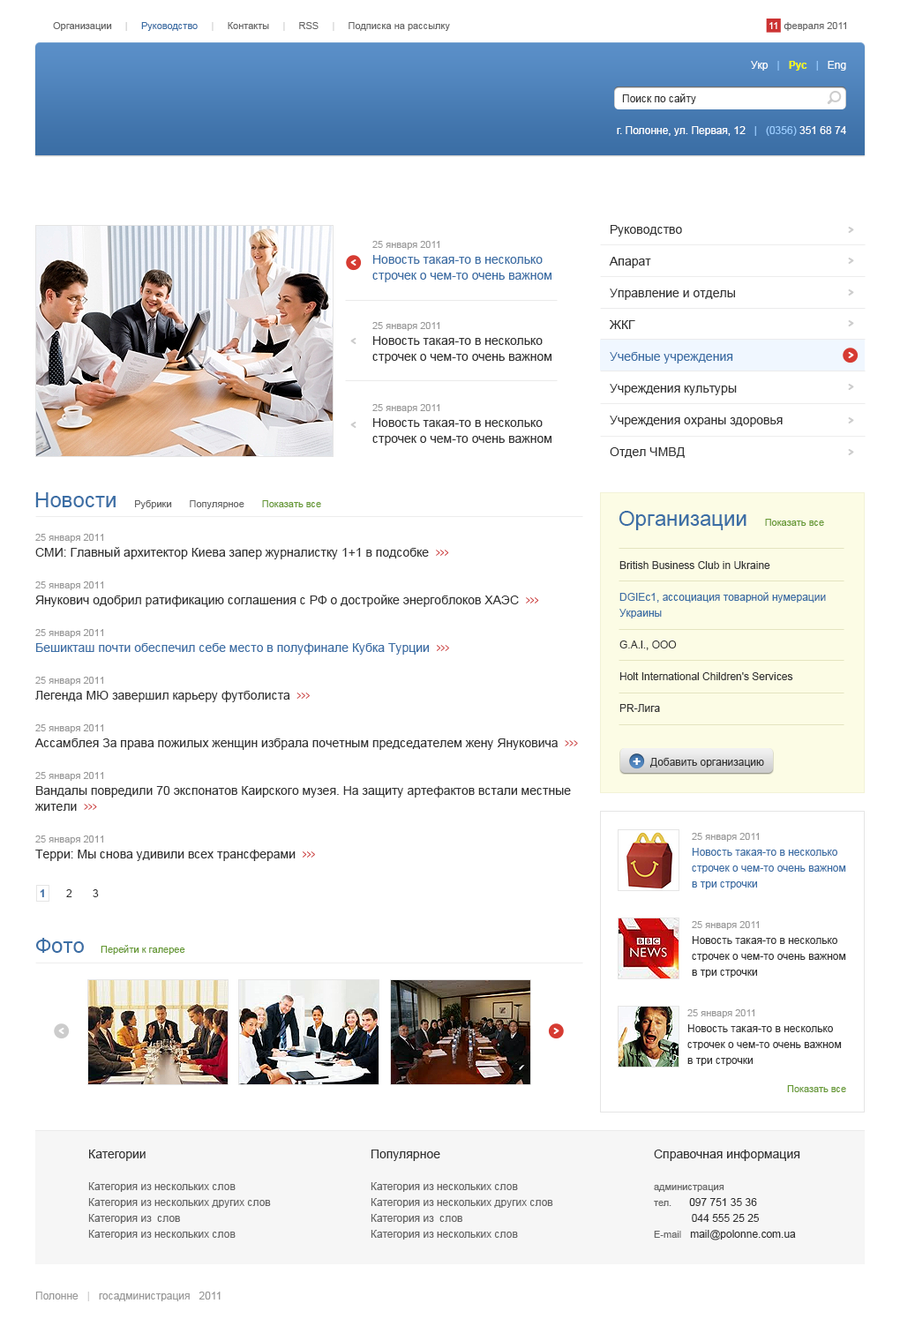
<style>
.page{position:relative;width:900px;height:1326px;background:#ffffff}
.page>*{position:absolute;margin:0}
.t1{font:9.7px "ArialMT";color:#666666}
.t2{font:9.7px "ArialMT";color:#cccccc}
.t3{font:9.7px "ArialMT";color:#3b6ea5}
.t4{font:9.7px "ArialMT";color:#ffffff}
.t5{font:10.6px "ArialMT";color:#fefefe}
.t6{font:10.6px "ArialMT";color:#99ccff}
.t7{font:10.6px "Arial-BoldMT";color:#ffff00}
.t8{font:10.6px "ArialMT";color:#333333}
.t9{font:10.6px "ArialMT";color:#ffffff}
.t10{font:12.3px/31.7px "ArialMT";color:#333333}
.t11{font:12.3px/31.7px "ArialMT";color:#3b6ea5}
.t12{font:12.3px "ArialMT";color:#333333}
.t13{font:12.3px/15.9px "ArialMT";color:#3b6ea5}
.t14{font:9.7px/15.9px "ArialMT";color:#999999}
.t15{font:12.3px/15.9px "ArialMT";color:#333333}
.t16{font:21.2px "ArialMT";color:#3b6ea5}
.t17{font:9.7px "ArialMT";color:#669933}
.t18{font:12.3px/15.9px "ArialMT";color:#cc3333;scale:0.6 1}
.t19{font:10.6px/15.9px "ArialMT";color:#333333}
.t20{font:10.6px/15.9px "ArialMT";color:#3b6ea5}
.t21{font:14.1px "Arial-BoldMT";color:#ffffff}
.t22{font:10.6px "Arial-BoldMT";color:#3b6ea5}
.t23{font:10.6px/15.9px "ArialMT";color:#666666}
.t24{font:9.7px/15.9px "ArialMT";color:#666666}
.t25{font:10.6px "ArialMT";color:#999999}
.t26{font:10.6px "ArialMT";color:#cccccc}
</style>
<div class="page">
<p class="t1" style="left:53px;top:22px;width:397px;height:9px">Организации     <span class="t2">|     </span><span class="t3">Руководство     </span><span class="t2">|</span>     Контакты     <span class="t2">|</span>     RSS     <span class="t2">|</span>     Подписка на рассылку</p>
<p class="t1" style="left:769px;top:22px;width:77px;height:9px"><span class="t4">11</span>  февраля 2011</p>
<p class="t5" style="left:751px;top:61px;width:95px;height:10px">Укр   <span class="t6">|   </span><span class="t7">Рус   </span><span class="t6">|</span>   Eng</p>
<p class="t8" style="left:622px;top:93px;width:74px;height:11px">Поиск по сайту</p>
<p class="t9" style="left:616px;top:126px;width:230px;height:10px">г. Полонне, ул. Первая, 12   <span class="t6">|   (0356)</span> 351 68 74</p>
<p class="t10" style="left:609px;top:225px;width:173px;height:233px">Руководство<br>Апарат<br>Управление и отделы<br>ЖКГ<br><span class="t11">Учебные учреждения<br></span>Учреждения культуры<br>Учреждения охраны <span class="t12">здоровья<br></span>Отдел ЧМВД</p>
<p class="t13" style="left:372px;top:241px;width:179px;height:41px"><span class="t14">25 января 2011<br></span>Новость такая-то в несколько<br>строчек о чем-то очень важном</p>
<p class="t15" style="left:372px;top:322px;width:179px;height:41px"><span class="t14">25 января 2011<br></span>Новость такая-то в несколько<br>строчек о чем-то очень важном</p>
<p class="t15" style="left:372px;top:404px;width:179px;height:41px"><span class="t14">25 января 2011<br></span>Новость такая-то в несколько<br>строчек о чем-то очень важном</p>
<p class="t1" style="left:35px;top:492px;width:286px;height:17px"><span class="t16">Новости   </span>Рубрики   Популярное   <span class="t17">Показать все</span></p>
<p class="t17" style="left:618px;top:511px;width:206px;height:19px"><span class="t16">Организации   </span>Показать все</p>
<p class="t15" style="left:34px;top:534px;width:544px;height:327px"><span class="t14">25 января 2011<br></span>СМИ: Главный архитектор Киева запер журналистку 1+1 в подсобке  <span class="t18">&gt;&gt;&gt;<br></span><span class="t14"><br>25 января 2011<br></span>Янукович одобрил ратификацию соглашения с РФ о достройке энергоблоков ХАЭС  <span class="t18">&gt;&gt;&gt;<br><br></span><span class="t14">25 января 2011<br></span><span class="t13">Бешикташ почти обеспечил себе место в полуфинале Кубка Турции  </span><span class="t18">&gt;&gt;&gt;<br></span><span class="t14"><br>25 января 2011<br></span>Легенда МЮ завершил карьеру футболиста  <span class="t18">&gt;&gt;&gt;<br></span><span class="t14"><br>25 января 2011<br></span>Ассамблея За права пожилых женщин избрала почетным председателем жену Януковича  <span class="t18">&gt;&gt;&gt;<br></span><span class="t14"><br>25 января 2011<br></span>Вандалы повредили 70 экспонатов Каирского музея. На защиту артефактов встали местные жители  <span class="t18">&gt;&gt;&gt;<br></span><span class="t14"><br>25 января 2011<br></span>Терри: Мы снова удивили всех трансферами  <span class="t18">&gt;&gt;&gt;</span></p>
<p class="t19" style="left:619px;top:561px;width:206px;height:151px">British Business Club in Ukraine<br><br><span class="t20">DGIEc1, ассоциация товарной нумерации Украины<br></span><br>G.A.l., ООО<br><br>Holt International Children's Services<br><br>PR-Лига<br><br>Skay and Stars/Скай энд Старз<br><br><br>Азарт, ЧП<br>Айс лейбл, ООО<br>Академия, аналитический центр<br>Академия строительства Украины<br>Академия технологических наук Украины<br>Алиса, общество инвалидов по трудоустройству<br>Алис, ООО<br>Алкион, ЧП<br>Альфа-с, ООО<br>Альфа-тур, ООО<br>Амави фильмс, ООО</p>
<p class="t21" style="left:632px;top:758px;width:8px;height:7px">+</p>
<p class="t8" style="left:649px;top:758px;width:115px;height:9px">Добавить организацию</p>
<p class="t20" style="left:691px;top:833px;width:155px;height:56px"><span class="t14">25 января 2011<br></span>Новость такая-то в несколько<br>строчек о чем-то очень важном<br>в три строчки</p>
<p class="t8" style="left:40px;top:889px;width:59px;height:8px"><span class="t22">1    </span>   2       3</p>
<p class="t19" style="left:691px;top:921px;width:155px;height:56px"><span class="t14">25 января 2011<br></span>Новость такая-то в несколько<br>строчек о чем-то очень важном<br>в три строчки</p>
<p class="t16" style="left:35px;top:937px;width:49px;height:15px">Фото</p>
<p class="t17" style="left:101px;top:945px;width:84px;height:9px">Перейти к галерее</p>
<p class="t19" style="left:687px;top:1009px;width:154px;height:56px"><span class="t14">25 января 2011<br></span>Новость такая-то в несколько<br>строчек о чем-то очень важном<br>в три строчки</p>
<p class="t17" style="left:787px;top:1085px;width:59px;height:7px">Показать все</p>
<p class="t23" style="left:88px;top:1149px;width:183px;height:90px"><span class="t15">Категории<br><br></span>Категория из нескольких слов<br>Категория из нескольких других слов<br>Категория из  слов<br>Категория из нескольких слов</p>
<p class="t23" style="left:370px;top:1149px;width:183px;height:90px"><span class="t15">Популярное<br><br></span>Категория из нескольких слов<br>Категория из нескольких других слов<br>Категория из  слов<br>Категория из нескольких слов</p>
<p class="t19" style="left:654px;top:1149px;width:146px;height:91px"><span class="t15">Справочная информация<br><br></span><span class="t24">администрация<br>тел.      </span>097 751 35 36<br>              044 555 25 25<br><span class="t24">E-mail   </span>mail@polonne.com.ua</p>
<p class="t25" style="left:35px;top:1291px;width:185px;height:10px">Полонне   <span class="t26">|</span>   госадминистрация   2011</p>
</div>
